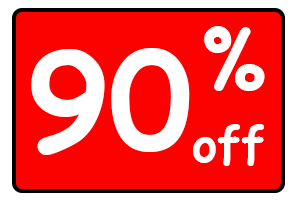
<style>
.page{position:relative;width:300px;height:200px;background:#fb0200}
.page>*{position:absolute;margin:0}
.t1{font:80px "ComicSansMS-Bold";color:#ffffff}
.t2{font:133.3px "ComicSansMS-Bold";color:#ffffff}
.t3{font:48px "ComicSansMS-Bold";color:#ffffff}
</style>
<div class="page">
<p class="t1" style="left:204px;top:26px;width:61px;height:65px">%</p>
<p class="t2" style="left:31px;top:48px;width:159px;height:107px">90</p>
<p class="t3" style="left:193px;top:124px;width:71px;height:42px">off</p>
</div>
